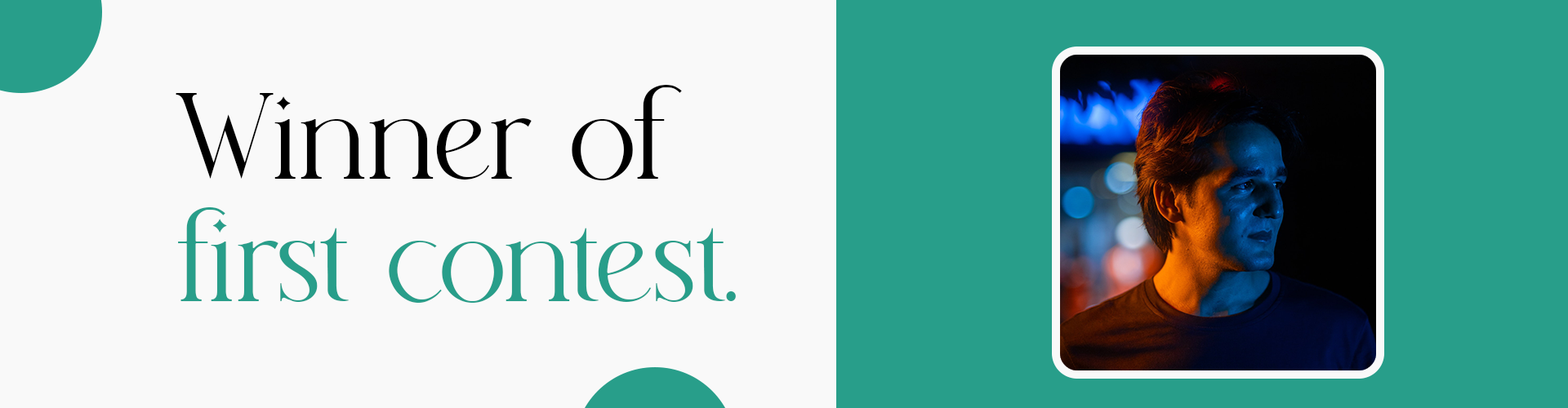
<style>
.page{position:relative;width:1568px;height:408px;background:#f9f9f9}
.page>*{position:absolute;margin:0}
.t1{font:122.5px/122.5px "histeagin-Regular";color:#289e8a}
.t2{font:122.5px/122.5px "histeagin-Regular";color:#000000}
</style>
<div class="page">
<p class="t1" style="left:176px;top:85px;width:560px;height:218px"><span class="t2">Winner of<br></span>first contest.</p>
</div>
